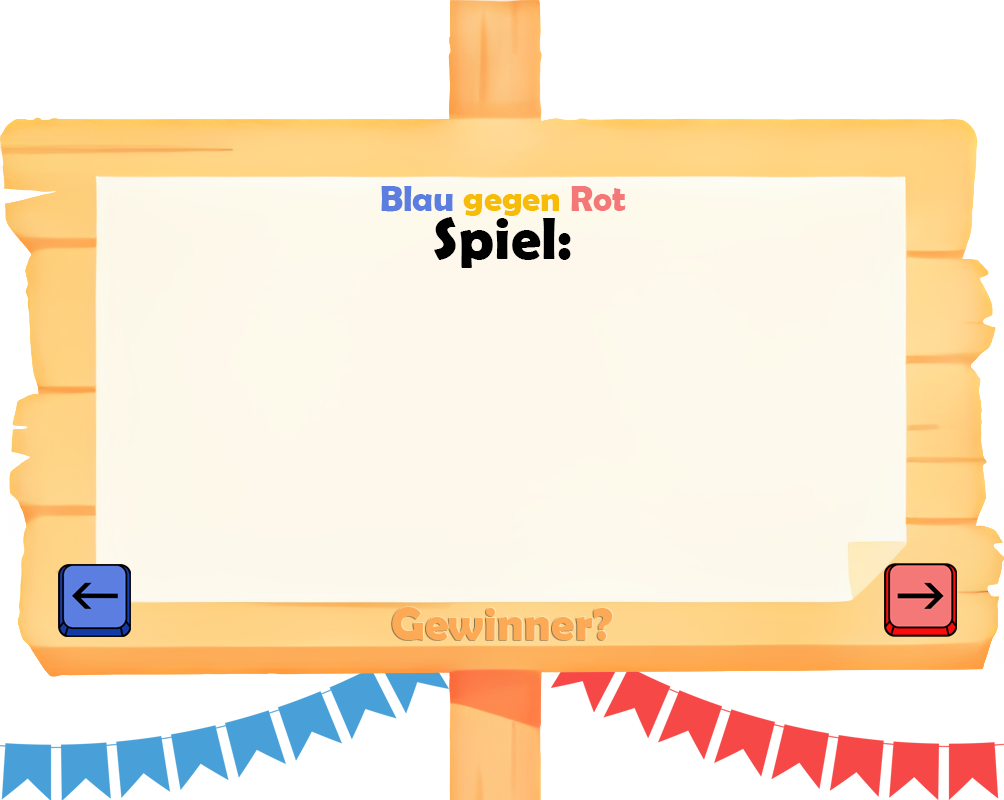
<style>
.page{position:relative;width:1004px;height:800px;background:#ffffff}
.page>*{position:absolute;margin:0}
.t1{font:60px/48px "BerlinSansFBDemi-Bold";color:#000000}
.t2{font:36px/48px "BerlinSansFBDemi-Bold";color:#5b7ee0}
.t3{font:36px/48px "BerlinSansFBDemi-Bold";color:#f7bc07}
.t4{font:36px/48px "BerlinSansFBDemi-Bold";color:#f57878}
.t5{font:47.5px "BerlinSansFBDemi-Bold";color:#fdaa57}
</style>
<div class="page">
<p class="t1" style="left:381px;top:186px;width:245px;height:82px;text-align:center"><span class="t2">Blau</span><span class="t3"> gegen </span><span class="t4">Rot<br></span>Spiel:</p>
<p class="t5" style="left:392px;top:607px;width:221px;height:33px">Gewinner?</p>
</div>
